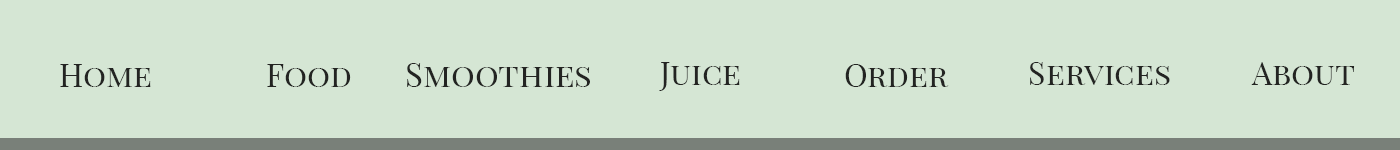
<style>
.page{position:relative;width:1400px;height:150px;background:#d5e6d4}
.page>*{position:absolute;margin:0}
.t1{font:32px "PlayfairDisplay-Regular";color:#232422;font-variant:small-caps}
.t2{font:33px "PlayfairDisplay-Regular";color:#232422;font-variant:small-caps}
</style>
<div class="page">
<p class="t1" style="left:60px;top:64px;width:91px;height:23px">Home</p>
<p class="t1" style="left:267px;top:64px;width:84px;height:23px">Food</p>
<p class="t2" style="left:407px;top:63px;width:183px;height:24px">Smoothies</p>
<p class="t1" style="left:659px;top:62px;width:81px;height:29px">Juice</p>
<p class="t1" style="left:845px;top:64px;width:104px;height:23px">Order</p>
<p class="t1" style="left:1030px;top:62px;width:140px;height:23px">Services</p>
<p class="t1" style="left:1251px;top:62px;width:104px;height:23px">About</p>
</div>
